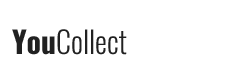
<style>
.page{position:relative;width:250px;height:80px;background:#ffffff}
.page>*{position:absolute;margin:0}
.t1{font:30px "Oswald-Light";color:#212121}
.t2{font:30px "Oswald-Bold";color:#212121}
</style>
<div class="page">
<p class="t1" style="left:12px;top:29px;width:115px;height:26px"><span class="t2">You</span>Collect</p>
</div>
